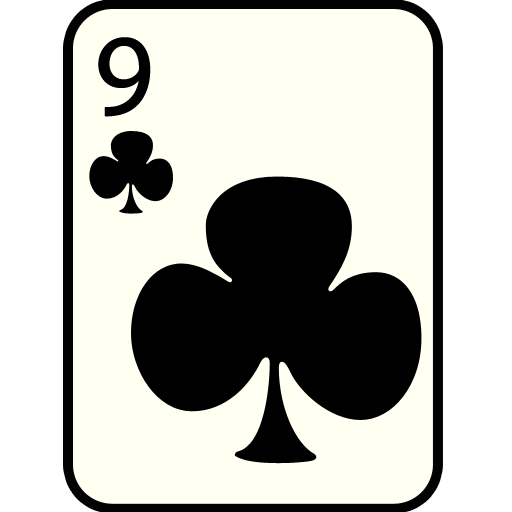
<style>
.page{position:relative;width:512px;height:512px;background:#fffff2}
.page>*{position:absolute;margin:0}
.t1{font:200px "MyriadPro-Regular";letter-spacing:-0.05em;color:#000000;font-variant:small-caps;font-weight:bold}
</style>
<div class="page">
<p class="t1" style="left:98px;top:37px;width:53px;height:80px">9</p>
</div>
